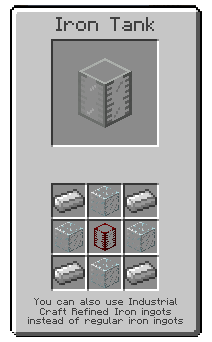
<style>
.page{position:relative;width:212px;height:342px;background:#c6c6c6}
.page>*{position:absolute;margin:0}
.t1{font:16px "Minecraftia";color:#404040}
.t2{font:8px "Minecraftia";color:#404040}
</style>
<div class="page">
<p class="t1" style="left:56px;top:17px;width:98px;height:14px">Iron Tank</p>
<p class="t2" style="left:28px;top:298px;width:155px;height:27px;text-align:center">You can also use Industrial Craft Refined Iron ingots instead of regular iron ingots</p>
</div>
